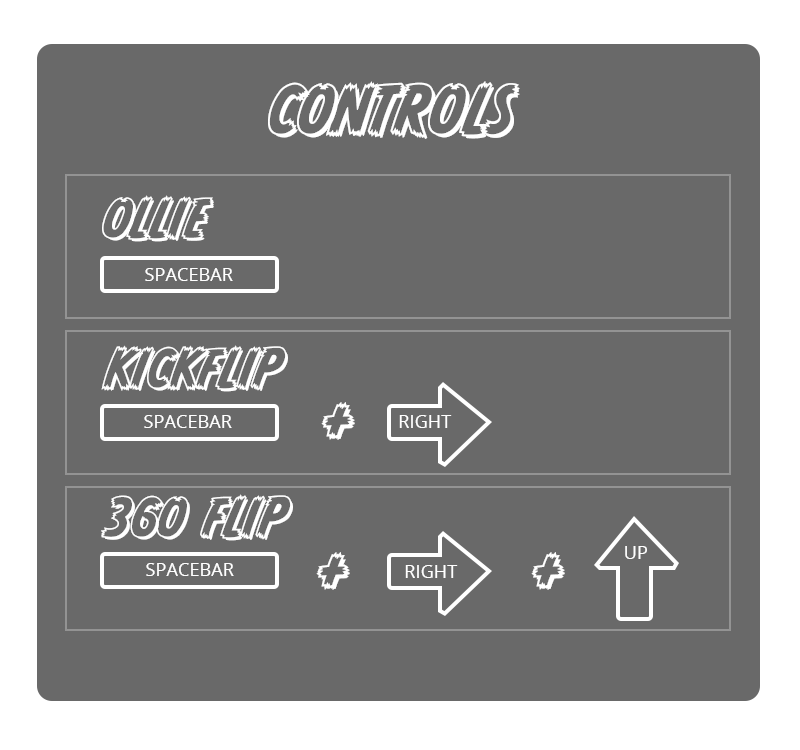
<style>
.page{position:relative;width:800px;height:750px;background:#696969}
.page>*{position:absolute;margin:0}
.t1{font:60px "CCMonsterMashOutline";letter-spacing:0.005em;color:#ffffff;text-transform:uppercase}
.t2{font:48px "CCMonsterMashOutline";letter-spacing:0.005em;color:#ffffff;text-transform:uppercase}
.t3{font:18px "OpenSans";letter-spacing:0.005em;color:#ffffff;text-transform:uppercase}
</style>
<div class="page">
<p class="t1" style="left:268px;top:81px;width:252px;height:58px">Controls</p>
<p class="t2" style="left:102px;top:195px;width:112px;height:47px">ollie</p>
<p class="t3" style="left:145px;top:268px;width:88px;height:13px">spacebar</p>
<p class="t2" style="left:101px;top:345px;width:187px;height:47px">kickflip</p>
<p class="t1" style="left:321px;top:402px;width:34px;height:38px">+</p>
<p class="t3" style="left:144px;top:415px;width:88px;height:13px">spacebar</p>
<p class="t3" style="left:399px;top:415px;width:53px;height:13px">right</p>
<p class="t2" style="left:101px;top:494px;width:192px;height:47px">360 flip</p>
<p class="t1" style="left:316px;top:552px;width:34px;height:38px">+</p>
<p class="t1" style="left:531px;top:552px;width:34px;height:38px">+</p>
<p class="t3" style="left:625px;top:546px;width:22px;height:13px">up</p>
<p class="t3" style="left:146px;top:563px;width:88px;height:13px">spacebar</p>
<p class="t3" style="left:405px;top:565px;width:53px;height:13px">right</p>
</div>
